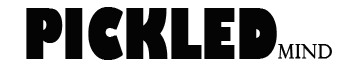
<style>
.page{position:relative;width:350px;height:70px;background:#ffffff}
.page>*{position:absolute;margin:0}
.t1{font:66.7px "GillSans-UltraBoldCondensed";color:#040404;font-weight:bold}
.t2{font:19.4px "PerpetuaTitlingMT-Light";color:#040404;font-weight:bold}
</style>
<div class="page">
<p class="t1" style="left:26px;top:7px;width:306px;height:53px">PICKLED<span class="t2">MIND</span></p>
</div>
